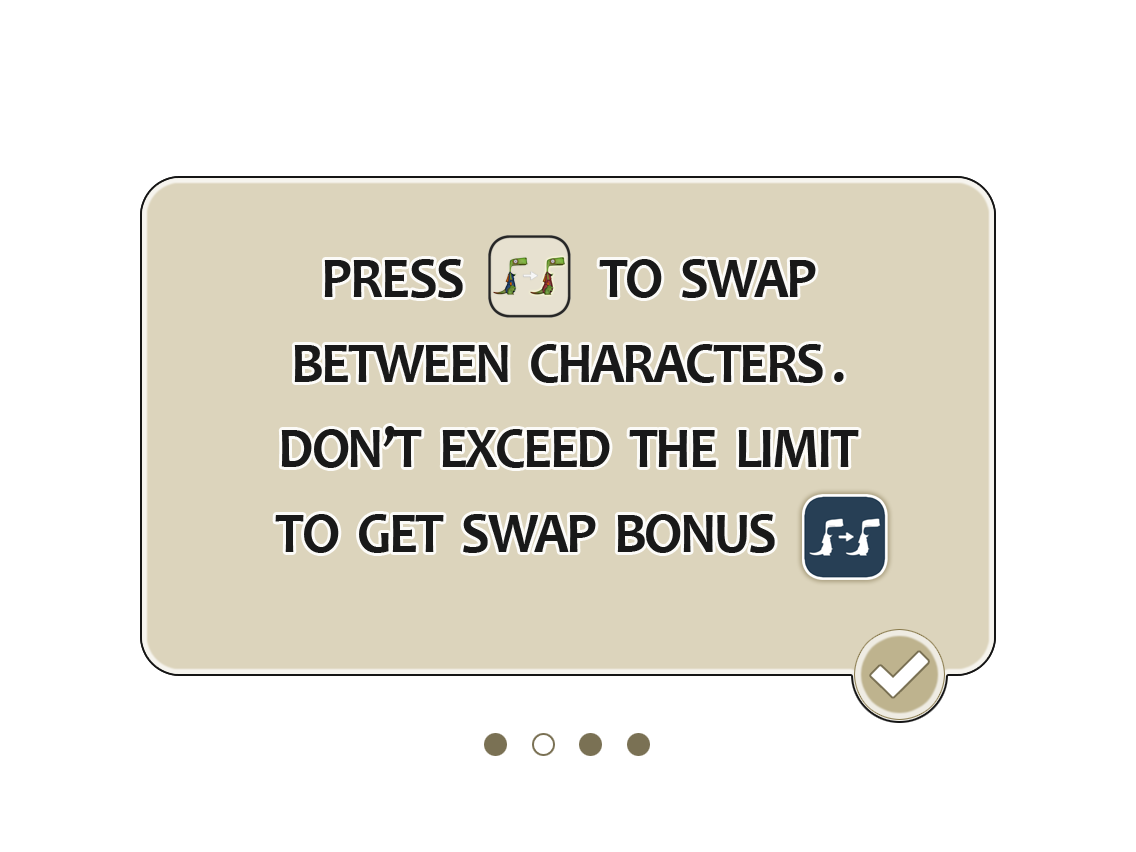
<style>
.page{position:relative;width:1136px;height:852px;background:#ffffff}
.page>*{position:absolute;margin:0}
.t1{font:57.8px/85px "Candara-Bold";letter-spacing:-0.04em;color:#191919;scale:0.94 1}
.t2{font:57.8px/85px "Candara-Bold";letter-spacing:-0.02em;color:#191919;scale:0.94 1}
</style>
<div class="page">
<p class="t1" style="left:275px;top:259px;width:585px;height:294px;text-align:center"><span class="t2">PRESS</span>              TO  SWAP<br>BETWEEN  CHARACTERS .<br>DON’T  EXCEED  THE  LIMIT<br>TO  GET  SWAP  BONUS    ----</p>
</div>
